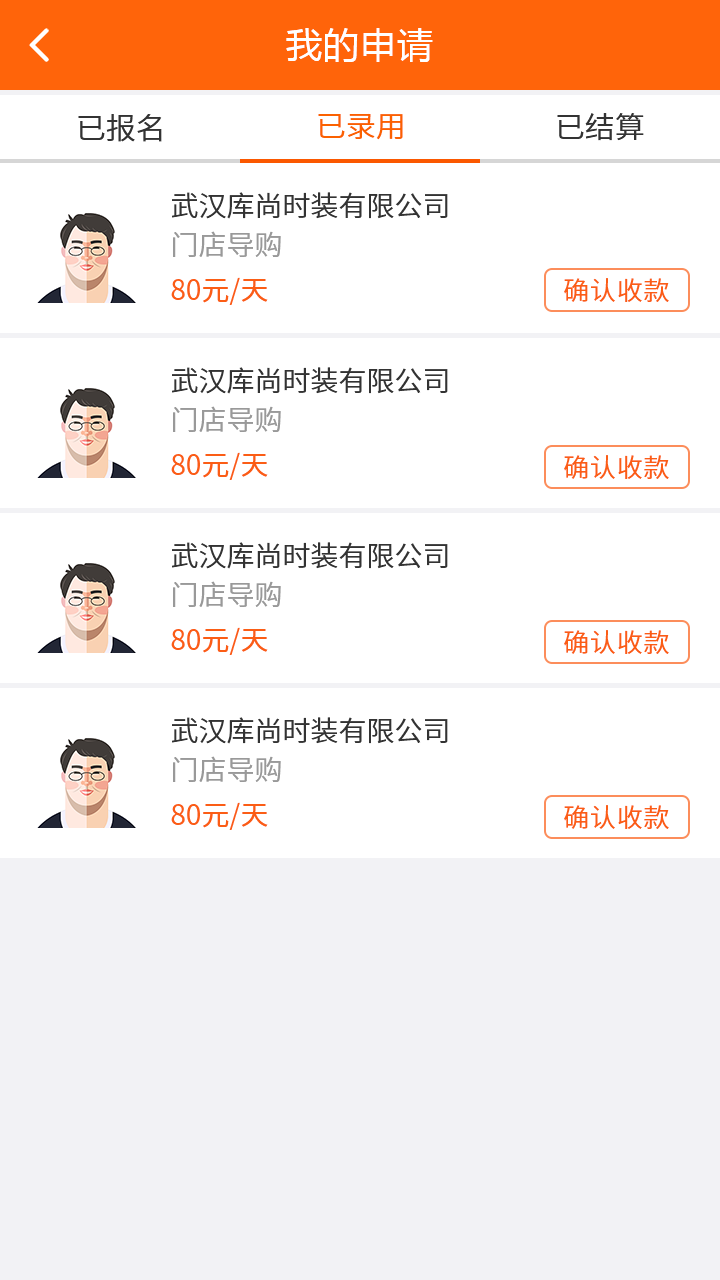
<style>
.page{position:relative;width:720px;height:1280px;background:#ffffff}
.page>*{position:absolute;margin:0}
.t1{font:36px "MicrosoftYaHei";letter-spacing:0.03em;color:#ffffff}
.t2{font:30px "NotoSansCJKsc-DemiLight";color:#fb6100;font-variant:small-caps}
.t3{font:30px "NotoSansCJKsc-DemiLight";color:#333333;font-variant:small-caps}
.t4{font:28px "NotoSansCJKsc-DemiLight";color:#333333;font-variant:small-caps}
.t5{font:28px "NotoSansCJKsc-DemiLight";color:#999999;font-variant:small-caps}
.t6{font:28px "NotoSansCJKsc-Regular";color:#fb5d15;font-variant:small-caps}
.t7{font:26px "NotoSansCJKsc-DemiLight";letter-spacing:0.03em;color:#fb5d15;font-variant:small-caps}
</style>
<div class="page">
<p class="t1" style="left:286px;top:28px;width:147px;height:34px">我的申请</p>
<p class="t2" style="left:318px;top:113px;width:85px;height:27px">已录用</p>
<p class="t3" style="left:557px;top:113px;width:87px;height:28px">已结算</p>
<p class="t3" style="left:78px;top:114px;width:84px;height:28px">已报名</p>
<p class="t4" style="left:172px;top:192px;width:276px;height:27px">武汉库尚时装有限公司</p>
<p class="t5" style="left:173px;top:231px;width:108px;height:26px">门店导购</p>
<p class="t6" style="left:171px;top:277px;width:97px;height:28px">80元/天</p>
<p class="t7" style="left:564px;top:278px;width:105px;height:24px">确认收款</p>
<p class="t4" style="left:172px;top:367px;width:276px;height:27px">武汉库尚时装有限公司</p>
<p class="t5" style="left:173px;top:406px;width:108px;height:26px">门店导购</p>
<p class="t6" style="left:171px;top:452px;width:97px;height:28px">80元/天</p>
<p class="t7" style="left:564px;top:455px;width:105px;height:24px">确认收款</p>
<p class="t4" style="left:172px;top:542px;width:276px;height:27px">武汉库尚时装有限公司</p>
<p class="t5" style="left:173px;top:581px;width:108px;height:26px">门店导购</p>
<p class="t6" style="left:171px;top:627px;width:97px;height:28px">80元/天</p>
<p class="t7" style="left:564px;top:630px;width:105px;height:24px">确认收款</p>
<p class="t4" style="left:172px;top:717px;width:276px;height:27px">武汉库尚时装有限公司</p>
<p class="t5" style="left:173px;top:756px;width:108px;height:26px">门店导购</p>
<p class="t6" style="left:171px;top:802px;width:97px;height:28px">80元/天</p>
<p class="t7" style="left:564px;top:805px;width:105px;height:24px">确认收款</p>
</div>
